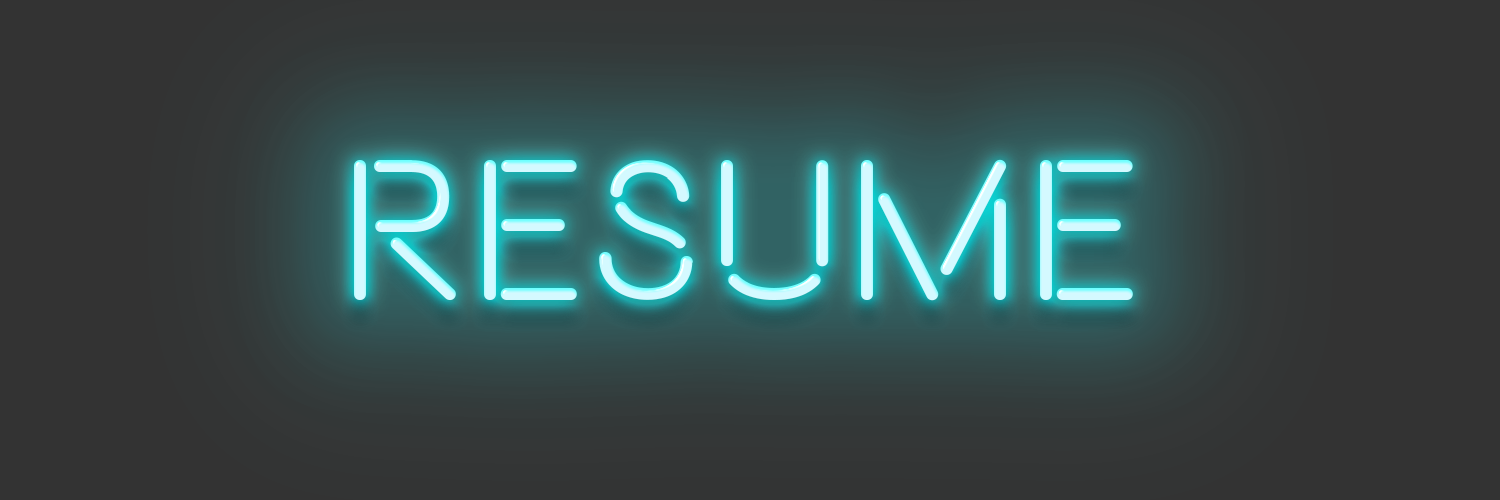
<style>
.page{position:relative;width:1500px;height:500px;background:#333333}
.page>*{position:absolute;margin:0}
.t1{font:200px "Beon-Medium";color:#d4f9ff}
</style>
<div class="page">
<p class="t1" style="left:354px;top:159px;width:779px;height:142px">Resume</p>
</div>
